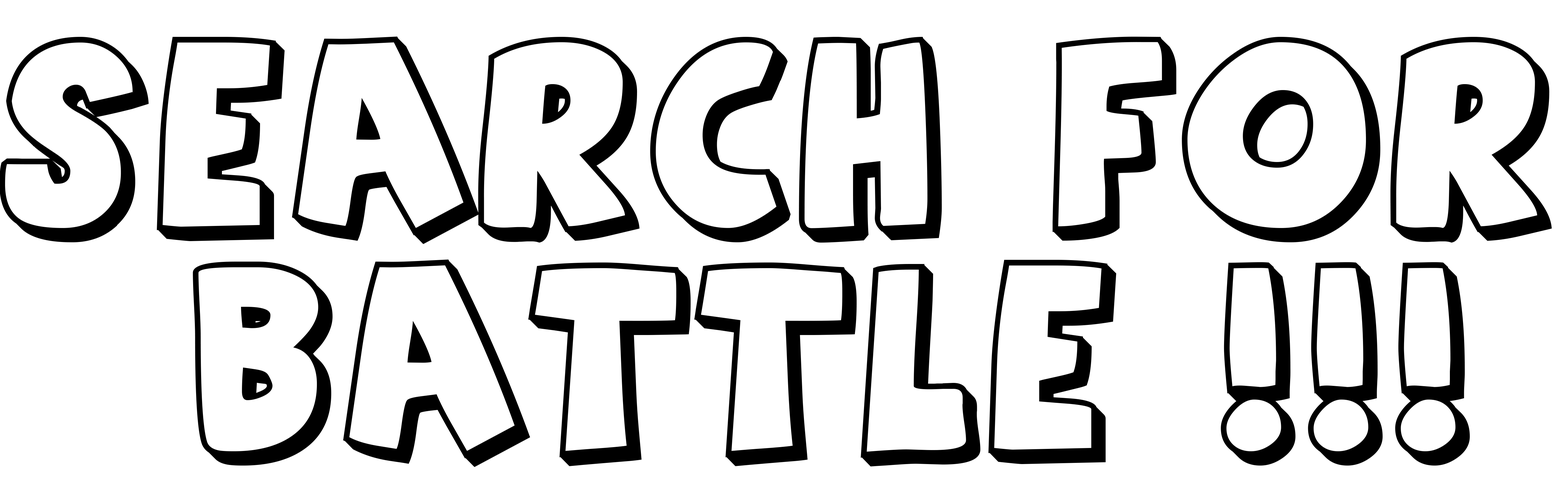
<style>
.page{position:relative;width:1568px;height:503px;background:#ffffff}
.page>*{position:absolute;margin:0}
.t1{font:186px "AgentOrange";letter-spacing:0.02em;color:#000000}
</style>
<div class="page">
<p class="t1" style="left:0px;top:37px;width:1552px;height:430px">search for <br>  battle !!!</p>
</div>
